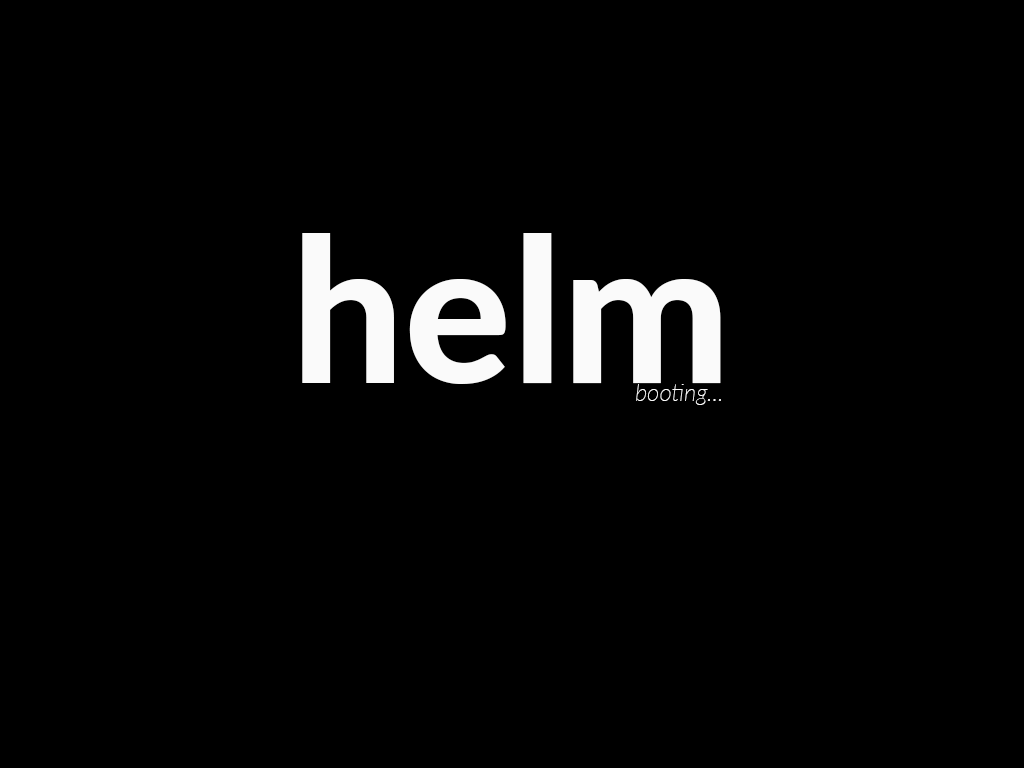
<style>
.page{position:relative;width:1024px;height:768px;background:#000000}
.page>*{position:absolute;margin:0}
.t1{font:200px "Lato-Heavy";color:#fafafa}
.t2{font:24px "Lato-ThinItalic";color:#fafafa}
</style>
<div class="page">
<p class="t1" style="left:302px;top:233px;width:419px;height:151px">helm</p>
<p class="t2" style="left:636px;top:384px;width:85px;height:21px">booting...</p>
</div>
